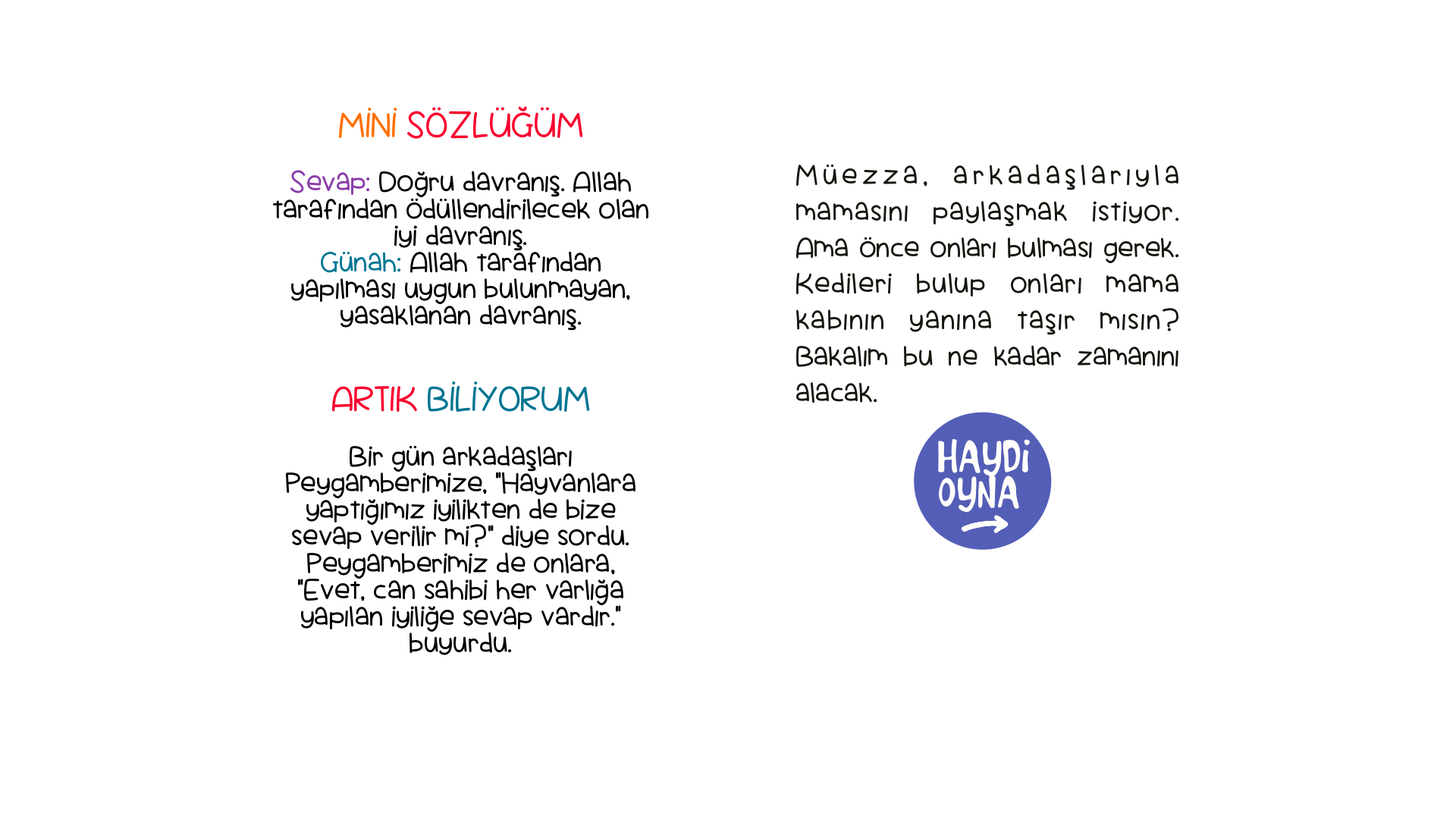
<style>
.page{position:relative;width:1456px;height:819px;background:#ffffff}
.page>*{position:absolute;margin:0}
.t1{font:31.6px "ScrambledTofu";color:#13170d}
.t2{font:31.6px "ScrambledTofu";color:#1a0f0a}
.t3{font:37.9px "ScrambledTofu";color:#ff6f00}
.t4{font:37.9px "ScrambledTofu";color:#f9002e}
.t5{font:31.6px "ScrambledTofu";color:#8a3ba8}
.t6{font:31.6px "ScrambledTofu";color:#000000}
.t7{font:31.6px "ScrambledTofu";color:#007795}
.t8{font:37.9px "ScrambledTofu";color:#007592}
</style>
<div class="page">
<p class="t1" style="left:0px;top:0px;width:1456px;height:819px;text-align:justify">Müezza, arkadaşlarıyla mamasını paylaşmak istiyor. Ama önce onları bulması gerek. Kedileri bulup onları mama kabının yanına taşır mısın? Bakalım bu ne kadar zamanını alacak.</p>
<p class="t2" style="left:0px;top:0px;width:1456px;height:819px;text-align:center"><span class="t3">MİNİ </span><span class="t4">SÖZLÜĞÜM<br><br></span><span class="t5">Sevap:</span><span class="t6"> Doğru davranış. Allah tarafından ödüllendirilecek olan iyi davranış.<br></span><span class="t7">Günah:</span><span class="t6"> Allah tarafından yapılması uygun bulunmayan, yasaklanan davranış.<br><br><br></span><span class="t4">ARTIK </span><span class="t8">BİLİYORUM<br><br></span><span class="t6">Bir gün arkadaşları Peygamberimize, “Hayvanlara yaptığımız iyilikten de bize sevap verilir mi?” diye sordu. Peygamberimiz de onlara, “Evet, can sahibi her varlığa yapılan iyiliğe sevap vardır.” buyurdu.<br></span> Öğrendiğimiz şeyleri bir süre sonra unutabiliriz. Bunun için bazen tekrar ederek hatırlamamız gerekir. Böylece öğrendiğimiz veya ezberlediğimiz bilgileri sürekli aklımızda tutabiliriz. <br>Öğrendiğimiz şeyleri bir süre sonra unutabiliriz. Bunun için bazen tekrar ederek hatırlamamız gerekir. Böylece öğrendiğimiz veya ezberlediğimiz bilgileri sürekli aklımızda tutabiliriz.</p>
</div>
